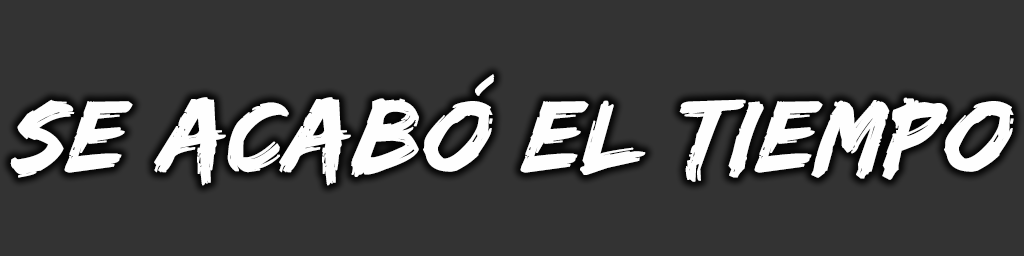
<style>
.page{position:relative;width:1024px;height:256px;background:#333333}
.page>*{position:absolute;margin:0}
.t1{font:105px "EdoSZ";color:#fefefe;font-weight:bold;font-style:italic;scale:1.05 1}
</style>
<div class="page">
<p class="t1" style="left:10px;top:74px;width:1004px;height:112px">SE ACABÓ EL TIEMPO</p>
</div>
